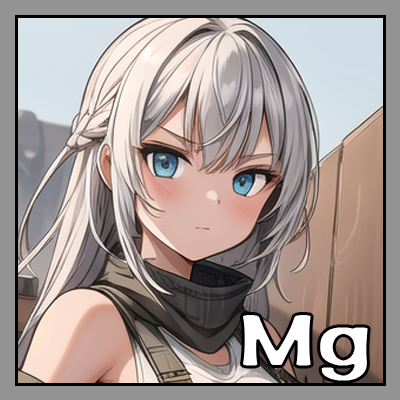
<style>
.page{position:relative;width:400px;height:400px}
.page>*{position:absolute;margin:0}
.t1{font:74.2px "YetR-HM";color:#ffffff;font-weight:bold;scale:1.33 1}
</style>
<div class="page">
<p class="t1" style="left:241px;top:313px;width:128px;height:69px">Mg</p>
</div>
